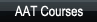
<style>
.page{position:relative;width:97px;height:22px}
.page>*{position:absolute;margin:0}
.t1{font:14px "ArialNarrow";color:#ffffff}
</style>
<div class="page">
<p class="t1" style="left:14px;top:5px;width:69px;height:12px">AAT Courses</p>
</div>
